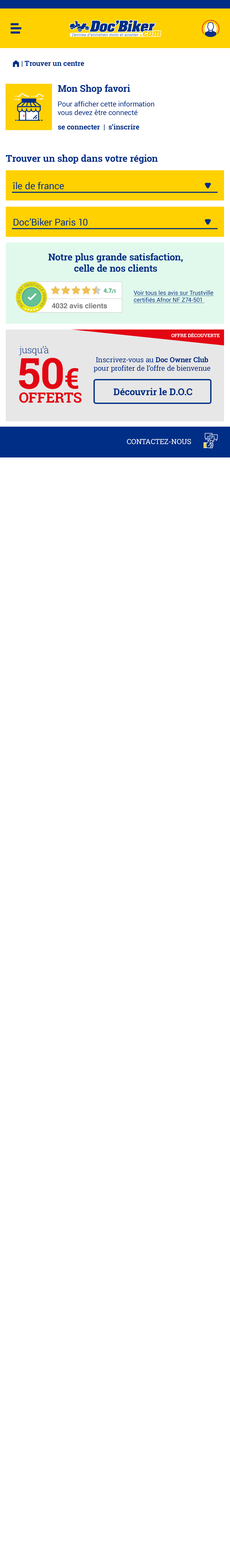
<style>
.page{position:relative;width:230px;height:1568px;background:#ffffff}
.page>*{position:absolute;margin:0}
.t1{font:7.1px "RobotoSlab-Bold";color:#002e86}
.t2{font:7.1px "FoundationIconsGeneral-Reg";color:#002e86}
.t3{font:9.5px "RobotoSlab-Bold";color:#002e86}
.t4{font:7.1px "Roboto-Regular";color:#002e86}
.t5{font:9.5px "Roboto-Regular";color:#002e86}
.t6{font:5.9px "Roboto-Regular";color:#002e86;text-decoration:underline}
.t7{font:7.1px "Helvetica-Bold";color:#7a7a7a}
.t8{font:4.7px "RobotoSlab-Bold";color:#ffffff;text-transform:uppercase}
.t9{font:9.5px "RobotoSlab-Light";color:#002e86}
.t10{font:42.6px "RobotoSlab-Bold";color:#e30613}
.t11{font:28.4px "RobotoSlab-Bold";color:#e30613}
.t12{font:7.1px "RobotoSlab-Regular";color:#002e86}
.t13{font:14.2px "RobotoSlab-Bold";color:#e30613;text-transform:uppercase}
.t14{font:7.1px "RobotoSlab-Regular";color:#ffffff;text-transform:uppercase}
</style>
<div class="page">
<p class="t1" style="left:13px;top:60px;width:71px;height:7px"><span class="t2">m </span>| Trouver un centre</p>
<p class="t3" style="left:58px;top:84px;width:72px;height:10px">Mon Shop favori</p>
<p class="t4" style="left:57px;top:101px;width:97px;height:14px">Pour afficher cette information <br>vous devez être connecté</p>
<p class="t1" style="left:58px;top:124px;width:81px;height:7px">se connecter  |  s’inscrire</p>
<p class="t3" style="left:6px;top:155px;width:152px;height:9px">Trouver un shop dans votre région</p>
<p class="t5" style="left:13px;top:182px;width:51px;height:7px">île de france</p>
<p class="t5" style="left:14px;top:218px;width:73px;height:8px">Doc’Biker Paris 10</p>
<p class="t3" style="left:48px;top:253px;width:134px;height:19px;text-align:center">Notre plus grande satisfaction,<br>celle de nos clients</p>
<p class="t6" style="left:133px;top:290px;width:80px;height:13px">Voir tous les avis sur Trustville<br>certifiés Afnor NF Z74-501</p>
<p class="t7" style="left:52px;top:303px;width:55px;height:5px">4032 avis clients</p>
<p class="t8" style="left:171px;top:333px;width:48px;height:4px">Offre découverte</p>
<p class="t9" style="left:19px;top:346px;width:29px;height:9px">jusqu’à</p>
<p class="t10" style="left:19px;top:358px;width:59px;height:31px">50<span class="t11">€</span></p>
<p class="t12" style="left:94px;top:357px;width:116px;height:15px;text-align:center">Inscrivez-vous au <span class="t1">Doc Owner Club<br></span>pour profiter de l’offre de bienvenue</p>
<p class="t3" style="left:113px;top:388px;width:79px;height:7px">Découvrir le D.O.C</p>
<p class="t13" style="left:19px;top:392px;width:62px;height:11px">offerts</p>
<p class="t14" style="left:127px;top:439px;width:64px;height:5px">contactez-nous</p>
</div>
